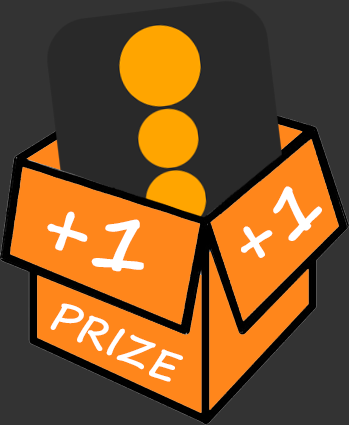
<style>
.page{position:relative;width:349px;height:425px;background:#333333}
.page>*{position:absolute;margin:0}
.t1{font:71.9px "SegoePrint-Bold";letter-spacing:0.025em;color:#ffffff}
.t2{font:83.1px "SegoePrint-Bold";letter-spacing:0.025em;color:#ffffff}
.t3{font:41.7px "SegoePrint-Bold";letter-spacing:0.025em;color:#ffffff}
</style>
<div class="page">
<p class="t1" style="left:241px;top:186px;width:81px;height:72px;rotate:-33deg">+1</p>
<p class="t2" style="left:47px;top:211px;width:97px;height:61px;rotate:18deg">+1</p>
<p class="t3" style="left:50px;top:303px;width:133px;height:79px;rotate:25deg">PRIZE</p>
</div>
